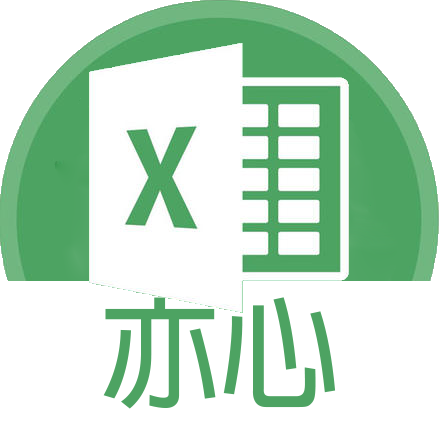
<style>
.page{position:relative;width:440px;height:440px;background:#ffffff}
.page>*{position:absolute;margin:0}
.t1{font:120px "AdobeFanHeitiStd-Bold";color:#4da362}
</style>
<div class="page">
<p class="t1" style="left:103px;top:297px;width:233px;height:112px">亦心</p>
</div>
